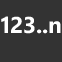
<style>
.page{position:relative;width:62px;height:62px;background:#333333}
.page>*{position:absolute;margin:0}
.t1{font:23px "SegoeWP-Bold";letter-spacing:-0.01em;color:#ffffff}
</style>
<div class="page">
<p class="t1" style="left:1px;top:16px;width:60px;height:18px">123..n</p>
</div>
